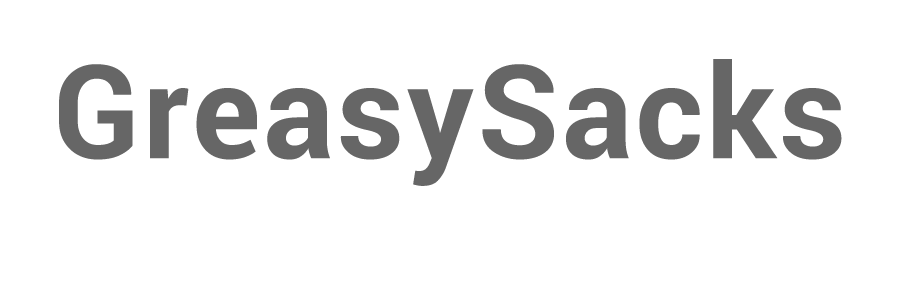
<style>
.page{position:relative;width:900px;height:300px;background:#ffffff}
.page>*{position:absolute;margin:0}
.t1{font:130px "Roboto-Bold";letter-spacing:0.025em;color:#666666}
</style>
<div class="page">
<p class="t1" style="left:59px;top:59px;width:783px;height:127px">GreasySacks</p>
</div>
